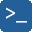
<style>
.page{position:relative;width:32px;height:32px;background:#236099}
.page>*{position:absolute;margin:0}
.t1{font:16px "FZLTZHK--GBK1-0";color:#ffffff}
</style>
<div class="page">
<p class="t1" style="left:6px;top:7px;width:21px;height:16px">&gt;_</p>
</div>
